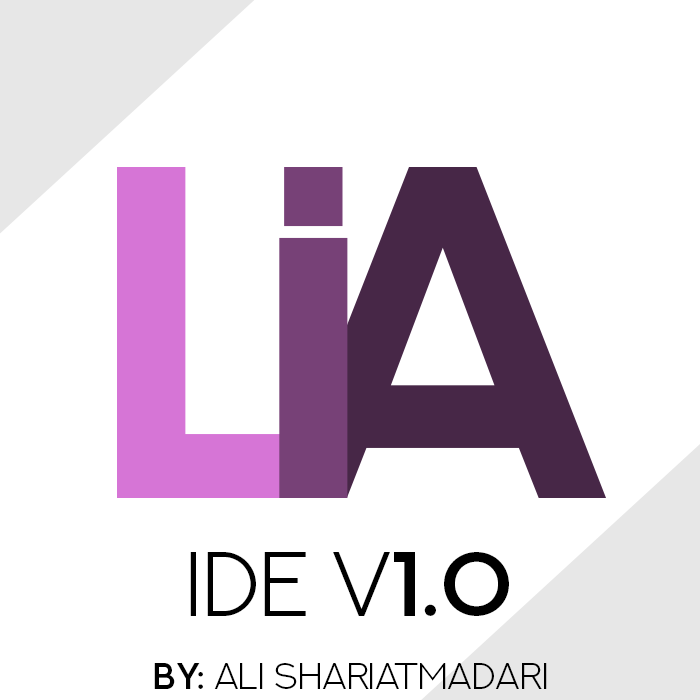
<style>
.page{position:relative;width:700px;height:700px;background:#ffffff}
.page>*{position:absolute;margin:0}
.t1{font:91.7px "NEXTART-Light";color:#000000}
.t2{font:91.7px "NEXTART-SemiBold";color:#000000}
.t3{font:37.3px "NEXTART-Light";color:#000000}
.t4{font:37.3px "NEXTART-SemiBold";color:#000000}
</style>
<div class="page">
<p class="t1" style="left:190px;top:552px;width:319px;height:64px">IDE v<span class="t2">1.0</span></p>
<p class="t3" style="left:154px;top:663px;width:393px;height:26px"><span class="t4">BY: </span>ali shariatmadari</p>
</div>
